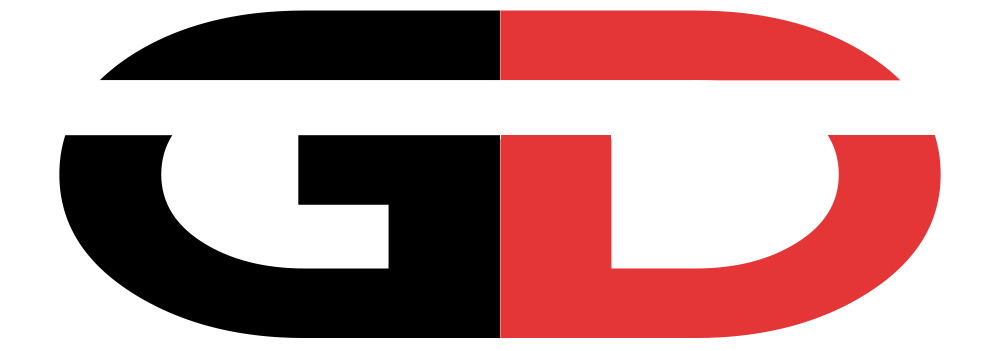
<style>
.page{position:relative;width:1000px;height:351px;background:#ffffff}
.page>*{position:absolute;margin:0}
.t1{font:608.3px "MODERNWARFARE";color:#000000}
</style>
<div class="page">
<p class="t1" style="left:59px;top:10px;width:441px;height:328px">G</p>
</div>
